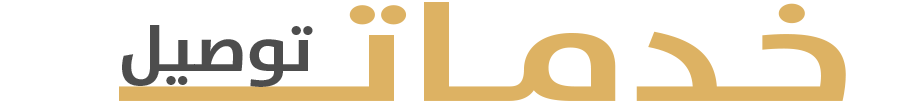
<style>
.page{position:relative;width:916px;height:110px;background:#ffffff}
.page>*{position:absolute;margin:0}
.t1{font:140.5px "TheSans-Bold";color:#ddb263;scale:1.34 1}
.t2{font:65.9px "TheSans-Bold";color:#4d4d4d;scale:1.07 1}
</style>
<div class="page">
<p class="t1" style="left:119px;top:2px;width:727px;height:99px">خـدمــاتـــــــــــ</p>
<p class="t2" style="left:122px;top:25px;width:191px;height:62px">توصيل</p>
</div>
